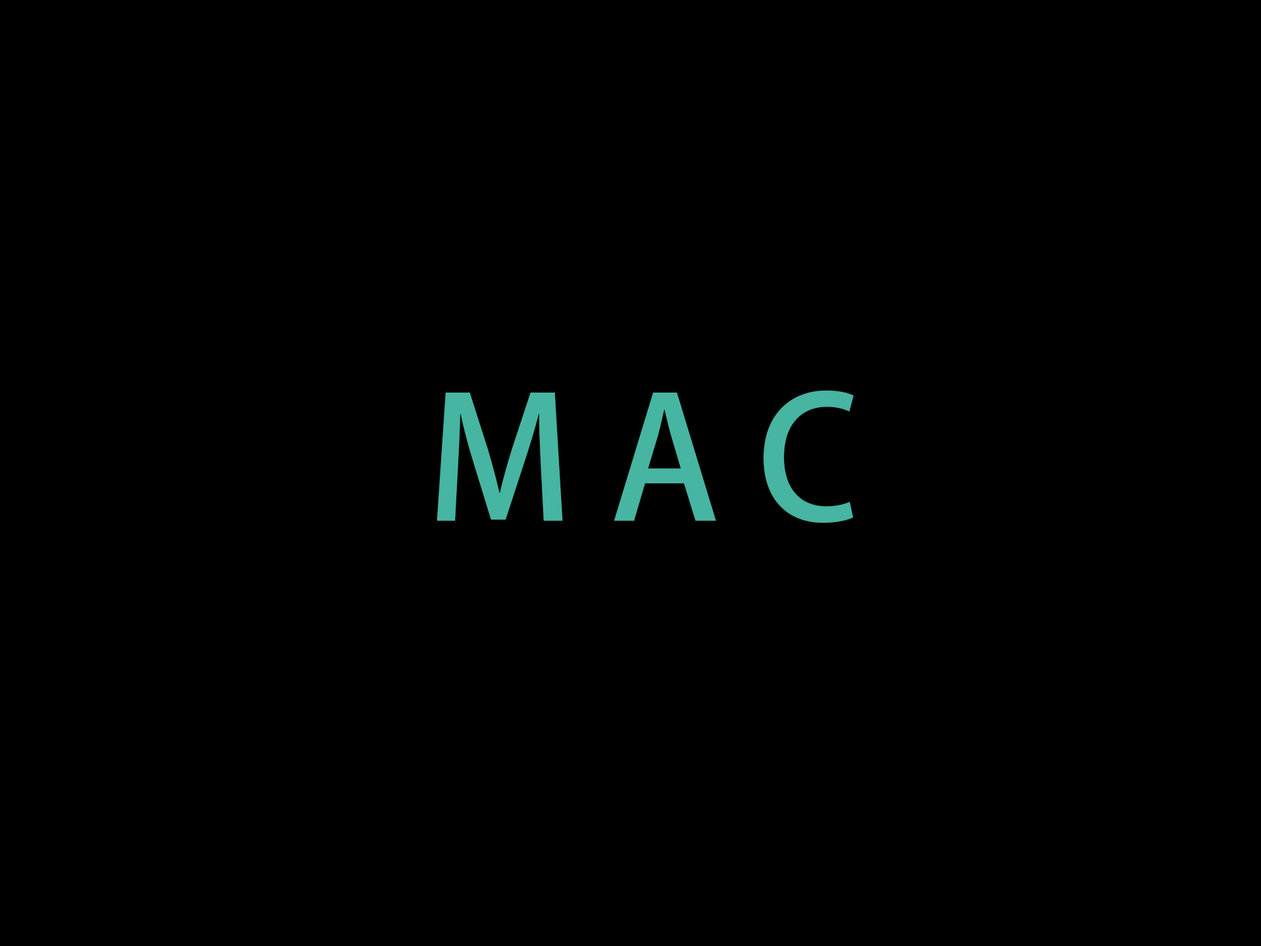
<style>
.page{position:relative;width:1261px;height:946px;background:#000000}
.page>*{position:absolute;margin:0}
.t1{font:166.8px "AdobeHeitiStd-Regular";color:#46b5a1}
</style>
<div class="page">
<p class="t1" style="left:437px;top:390px;width:417px;height:132px">M A C</p>
</div>
